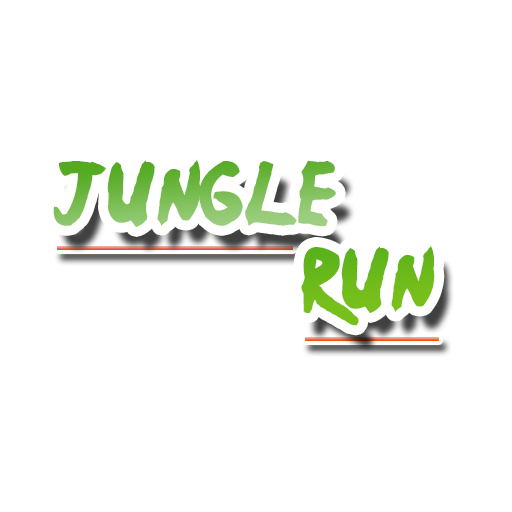
<style>
.page{position:relative;width:512px;height:512px;background:#ffffff}
.page>*{position:absolute;margin:0}
.t1{font:72px "Ninja-Naruto"}
</style>
<div class="page">
<p class="t1" style="left:53px;top:159px;width:382px;height:167px">jungle<br>                  run</p>
</div>
